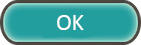
<style>
.page{position:relative;width:141px;height:45px;background:#239e9e}
.page>*{position:absolute;margin:0}
.t1{font:24px "Calibri";color:#ffffff}
</style>
<div class="page">
<p class="t1" style="left:57px;top:15px;width:27px;height:15px">OK</p>
</div>
